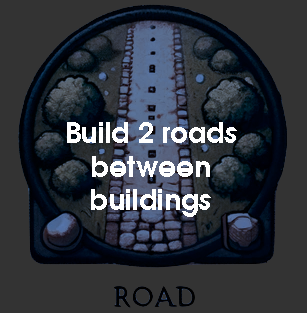
<style>
.page{position:relative;width:307px;height:313px;background:#333333}
.page>*{position:absolute;margin:0}
.t1{font:28px "AvantGardeLT-Demi";color:#ffffff}
</style>
<div class="page">
<p class="t1" style="left:67px;top:122px;width:170px;height:95px;text-align:center">Build 2 roads between buildings</p>
</div>
